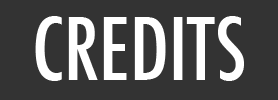
<style>
.page{position:relative;width:278px;height:100px;background:#333333}
.page>*{position:absolute;margin:0}
.t1{font:84px "Futura-CondensedMedium";color:#ffffff}
</style>
<div class="page">
<p class="t1" style="left:35px;top:16px;width:209px;height:65px">CREDITS</p>
</div>
